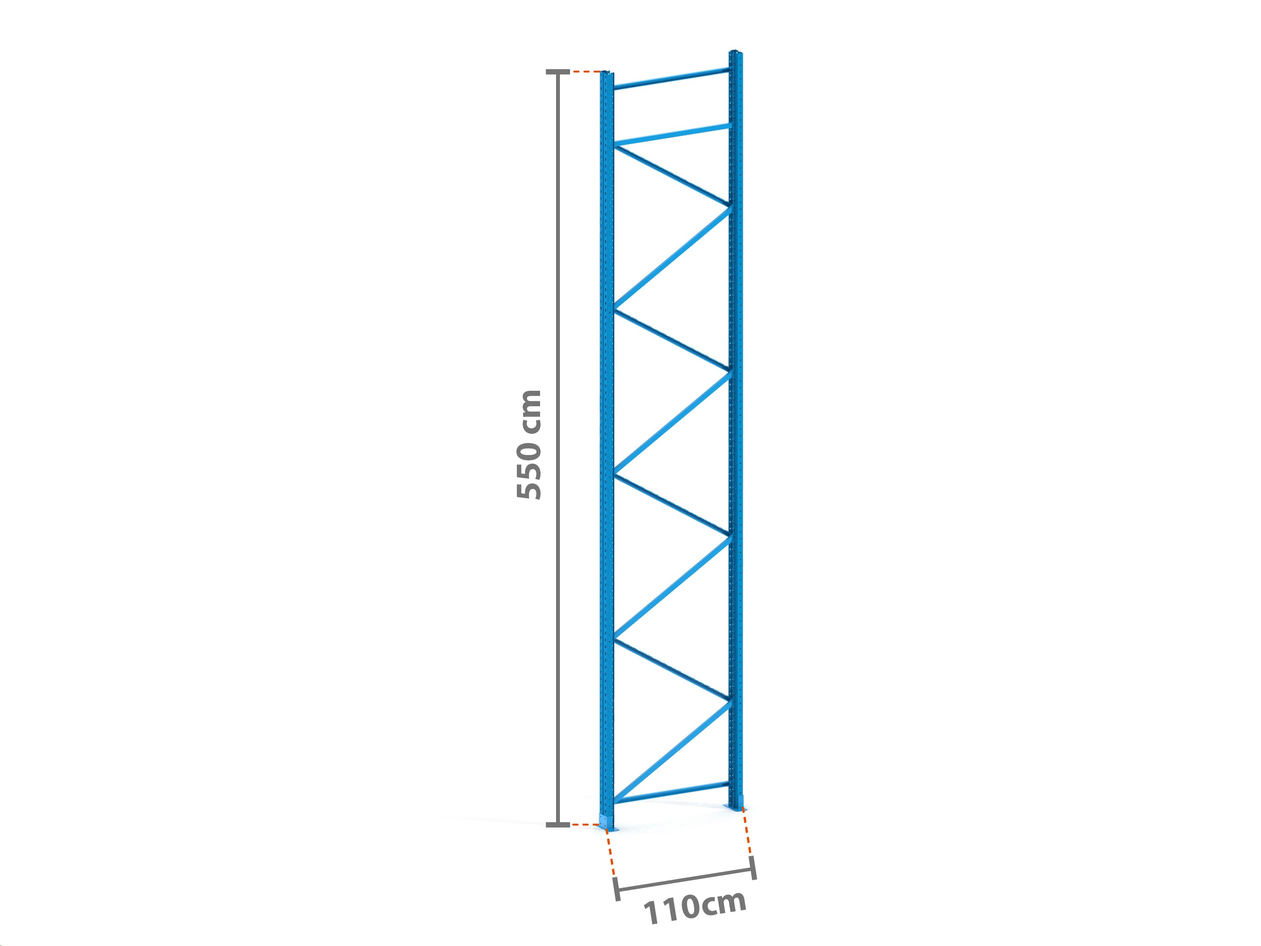
<style>
.page{position:relative;width:1261px;height:946px;background:#ffffff}
.page>*{position:absolute;margin:0}
.t1{font:35.5px "MyriadPro-Bold";color:#757575}
</style>
<div class="page">
<p class="t1" style="left:516px;top:391px;width:25px;height:109px;rotate:-90deg">550 cm</p>
<p class="t1" style="left:644px;top:893px;width:102px;height:31px;rotate:-9deg">110cm</p>
</div>
